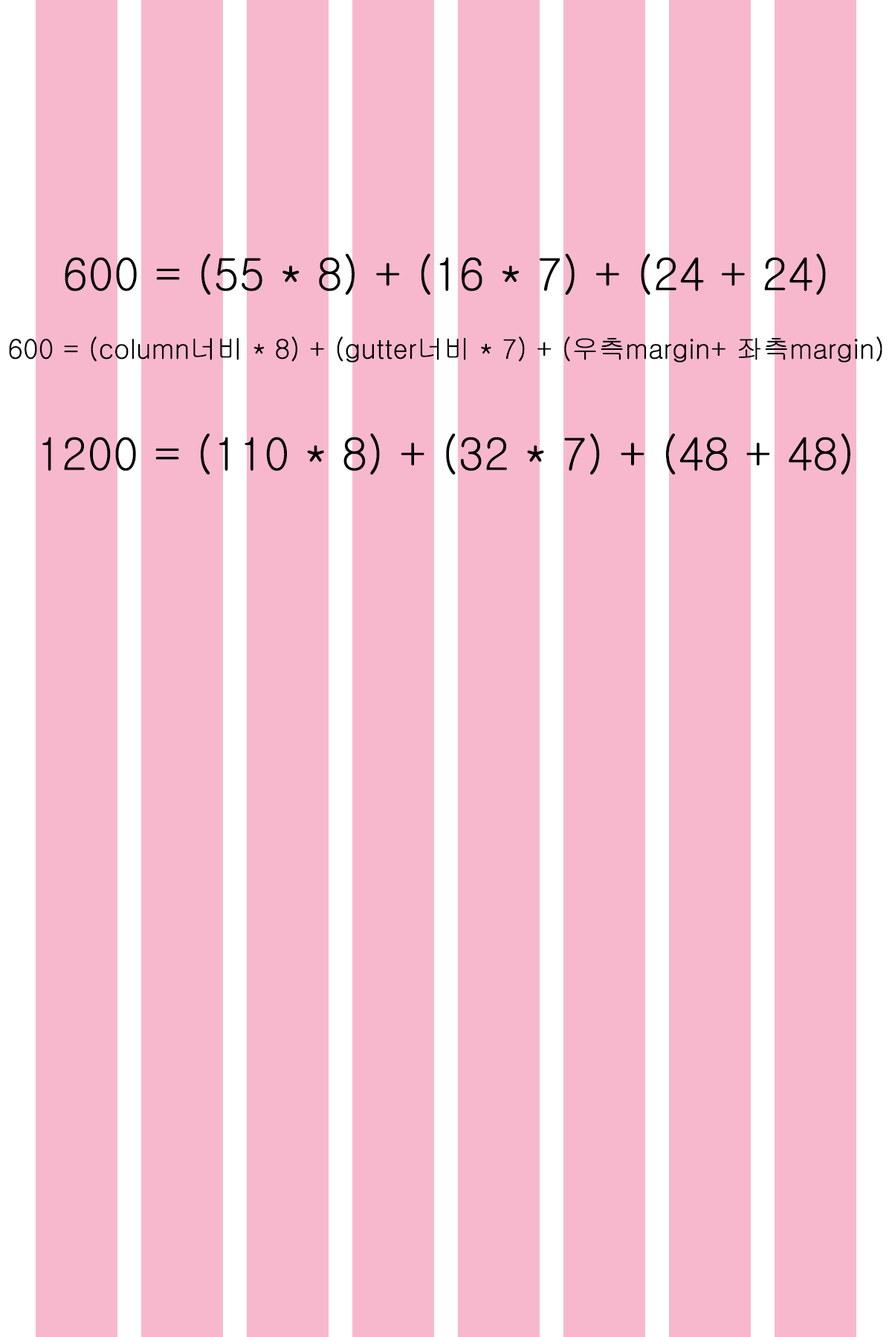
<style>
.page{position:relative;width:892px;height:1337px;background:#f7b8ce}
.page>*{position:absolute;margin:0}
.t1{font:44.6px "Gulim";color:#000000}
.t2{font:26.7px "Gulim";color:#000000}
</style>
<div class="page">
<p class="t1" style="left:65px;top:253px;width:760px;height:42px">600 = (55 * 8) + (16 * 7) + (24 + 24)</p>
<p class="t2" style="left:9px;top:337px;width:873px;height:26px">600 = (column너비 * 8) + (gutter너비 * 7) + (우측margin+ 좌측margin)</p>
<p class="t1" style="left:42px;top:433px;width:808px;height:42px">1200 = (110 * 8) + (32 * 7) + (48 + 48)</p>
</div>
